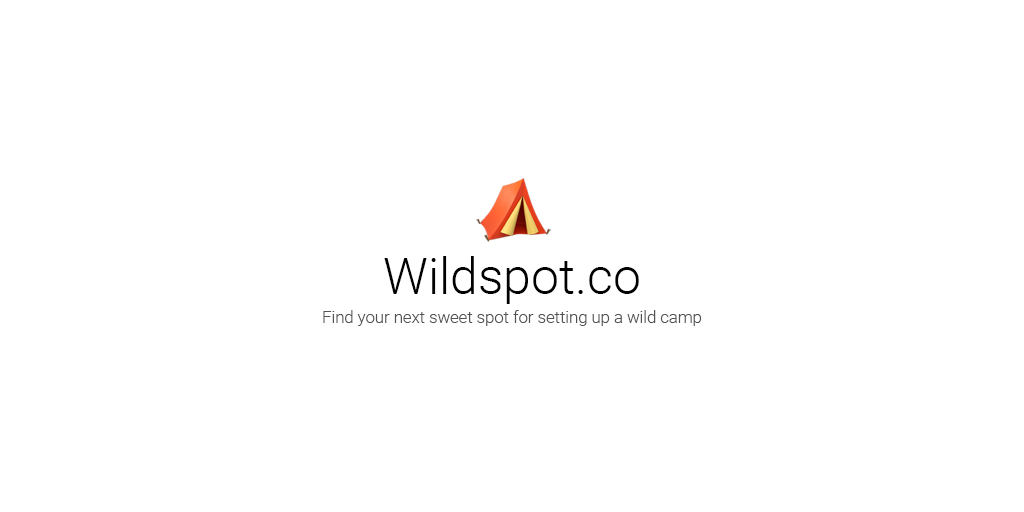
<style>
.page{position:relative;width:1024px;height:512px;background:#ffffff}
.page>*{position:absolute;margin:0}
.t1{font:50px "Roboto-Light";color:#000000}
.t2{font:16.7px "Roboto-Light";color:#525252}
</style>
<div class="page">
<p class="t1" style="left:384px;top:256px;width:255px;height:48px">Wildspot.co</p>
<p class="t2" style="left:323px;top:310px;width:379px;height:16px">Find your next sweet spot for setting up a wild camp</p>
</div>
